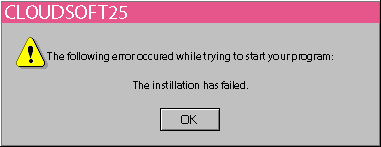
<style>
.page{position:relative;width:381px;height:147px;background:#c0c0c0}
.page>*{position:absolute;margin:0}
.t1{font:20px "MyriadPro-Regular";color:#ffffff}
.t2{font:11px "MyriadPro-Regular";color:#000000}
</style>
<div class="page">
<p class="t1" style="left:5px;top:5px;width:122px;height:14px">CLOUDSOFT25</p>
<p class="t2" style="left:47px;top:52px;width:286px;height:10px">The following error occured while trying to start your program:</p>
<p class="t2" style="left:133px;top:81px;width:115px;height:8px">The instillation has failed.</p>
</div>
